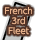
<style>
.page{position:relative;width:35px;height:40px;background:#ffffff}
.page>*{position:absolute;margin:0}
.t1{font:8px/10px "UDShinGoPro-Light";color:#e8b38d;font-weight:bold}
</style>
<div class="page">
<p class="t1" style="left:5px;top:7px;width:27px;height:28px;text-align:center">French<br>3rd<br>Fleet</p>
</div>
